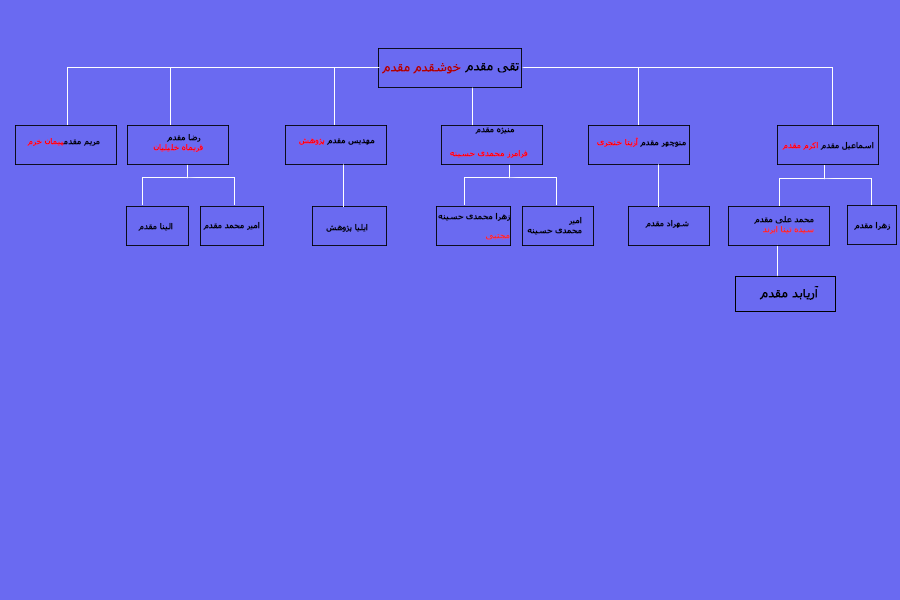
<style>
.page{position:relative;width:900px;height:600px;background:#6a6af1}
.page>*{position:absolute;margin:0}
.t1{font:12px "Tahoma";color:#ae0202;font-weight:bold}
.t2{font:12px "Tahoma";color:#000000;font-weight:bold}
.t3{font:8px "Tahoma";font-weight:bold}
.t4{font:8px "Tahoma";color:#000000;font-weight:bold}
.t5{font:8px "Tahoma";color:#ff0000;font-weight:bold}
.t6{font:8px "Tahoma";color:#f82828;font-weight:bold}
</style>
<div class="page">
<p class="t1" style="left:382px;top:63px;width:79px;height:11px">خوشقدم مقدم</p>
<p class="t2" style="left:465px;top:63px;width:54px;height:10px">تقی مقدم</p>
<p class="t3" style="left:27px;top:137px;width:73px;height:9px">مریم مقدمپیمان خرم</p>
<p class="t3" style="left:153px;top:133px;width:50px;height:19px;text-align:right">رضا مقدم <br>فریماه خلیلیان</p>
<p class="t4" style="left:475px;top:127px;width:40px;height:7px">منیژه مقدم</p>
<p class="t3" style="left:597px;top:137px;width:89px;height:10px">منوچهر مقدم آزیتا خنجری</p>
<p class="t4" style="left:299px;top:138px;width:76px;height:7px">مهدیس مقدم پژوهش</p>
<p class="t5" style="left:450px;top:149px;width:78px;height:9px">فرامرز محمدی حسینه</p>
<p class="t4" style="left:782px;top:141px;width:92px;height:9px">اسماعیل مقدم اکرم مقدم</p>
<p class="t4" style="left:138px;top:222px;width:35px;height:9px">الینا مقدم</p>
<p class="t4" style="left:203px;top:221px;width:57px;height:9px">امیر محمد مقدم</p>
<p class="t4" style="left:438px;top:212px;width:73px;height:28px;text-align:right">زهرا محمدی حسینه<br><span class="t6"><br>مجتبی</span></p>
<p class="t4" style="left:527px;top:216px;width:55px;height:19px;text-align:right">امیر<br>محمدی حسینه</p>
<p class="t4" style="left:645px;top:219px;width:44px;height:9px">شهراد مقدم</p>
<p class="t6" style="left:754px;top:215px;width:60px;height:19px;text-align:right"><span class="t4">محمد علی مقدم<br></span>سیده تینا ابرند</p>
<p class="t4" style="left:854px;top:221px;width:37px;height:9px">زهرا مقدم</p>
<p class="t4" style="left:326px;top:223px;width:42px;height:9px">ایلیا پژوهش</p>
<p class="t2" style="left:759px;top:286px;width:60px;height:14px">آریابد مقدم</p>
</div>
